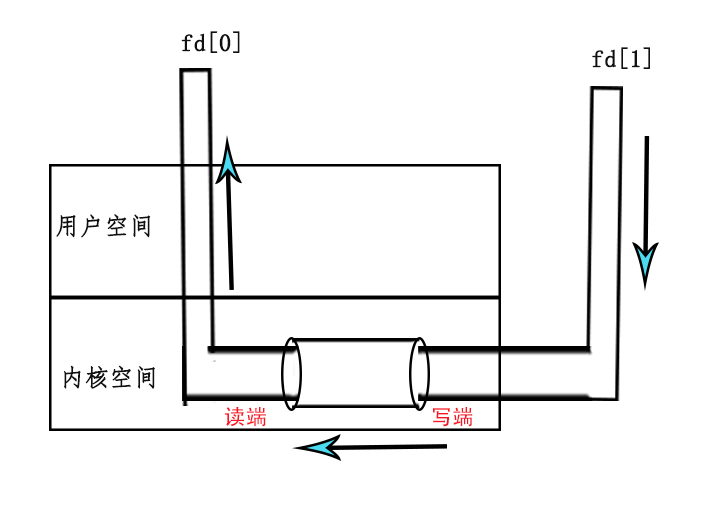
<style>
.page{position:relative;width:709px;height:510px;background:#ffffff}
.page>*{position:absolute;margin:0}
.t1{font:24.1px "FangSong";color:#111010;font-weight:bold}
.t2{font:21.5px "AdobeHeitiStd-Regular";color:#f81525}
</style>
<div class="page">
<p class="t1" style="left:181px;top:31px;width:59px;height:22px">fd[0]</p>
<p class="t1" style="left:592px;top:47px;width:58px;height:22px">fd[1]</p>
<p class="t1" style="left:56px;top:214px;width:95px;height:24px">用户空间</p>
<p class="t1" style="left:64px;top:365px;width:91px;height:24px">内核空间</p>
<p class="t2" style="left:224px;top:407px;width:42px;height:20px">读端</p>
<p class="t2" style="left:433px;top:407px;width:40px;height:20px">写端</p>
</div>
